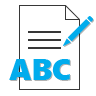
<style>
.page{position:relative;width:96px;height:96px;background:#ffffff}
.page>*{position:absolute;margin:0}
.t1{font:30px "SegoeUIBlack";color:#01aced}
</style>
<div class="page">
<p class="t1" style="left:9px;top:59px;width:61px;height:21px">ABC</p>
</div>
